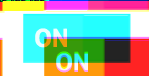
<style>
.page{position:relative;width:149px;height:76px;background:#ffffff}
.page>*{position:absolute;margin:0}
.t1{font:24.9px "Aller-Bold";letter-spacing:-0.01em}
</style>
<div class="page">
<p class="t1" style="left:35px;top:27px;width:32px;height:20px">ON</p>
</div>
